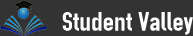
<style>
.page{position:relative;width:193px;height:36px;background:#333333}
.page>*{position:absolute;margin:0}
.t1{font:26.7px "OSP-DIN";color:#ffffff;scale:1.15 1}
</style>
<div class="page">
<p class="t1" style="left:62px;top:12px;width:131px;height:23px">Student Valley</p>
</div>
